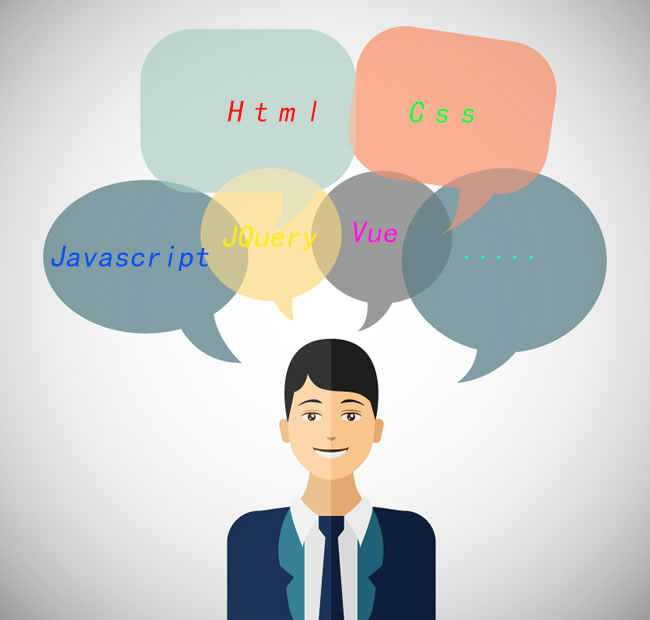
<style>
.page{position:relative;width:650px;height:620px}
.page>*{position:absolute;margin:0}
.t1{font:31px "KaiTi";letter-spacing:0.34em;color:#ff1212;font-style:italic}
.t2{font:31px "KaiTi";letter-spacing:0.34em;color:#15f945;font-style:italic}
.t3{font:31px "KaiTi";letter-spacing:0.02em;color:#ff12e0;font-style:italic}
.t4{font:31px "KaiTi";letter-spacing:0.02em;color:#ffeb12;font-style:italic}
.t5{font:31px "KaiTi";letter-spacing:0.02em;color:#084fee;font-style:italic}
.t6{font:31px "KaiTi";letter-spacing:0.02em;color:#12ffb4;font-style:italic}
</style>
<div class="page">
<p class="t1" style="left:227px;top:100px;width:90px;height:22px">Html</p>
<p class="t2" style="left:409px;top:101px;width:65px;height:22px">Css</p>
<p class="t3" style="left:353px;top:221px;width:44px;height:22px">Vue</p>
<p class="t4" style="left:223px;top:225px;width:95px;height:26px">JQuery</p>
<p class="t5" style="left:51px;top:245px;width:158px;height:26px">Javascript</p>
<p class="t6" style="left:464px;top:255px;width:69px;height:4px">.....</p>
</div>
